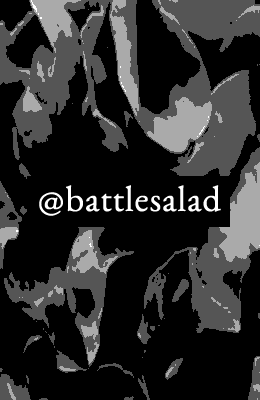
<style>
.page{position:relative;width:260px;height:400px;background:#000000}
.page>*{position:absolute;margin:0}
.t1{font:36px "EBGaramond";color:#ffffff;font-weight:bold}
</style>
<div class="page">
<p class="t1" style="left:39px;top:185px;width:182px;height:31px">@battlesalad</p>
</div>
